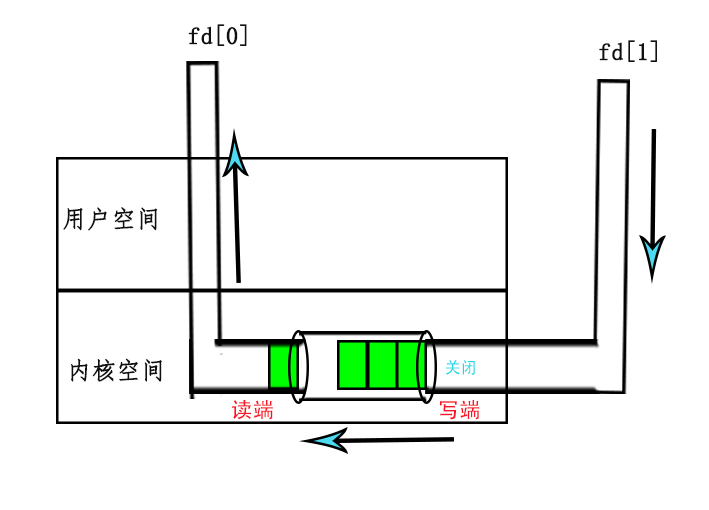
<style>
.page{position:relative;width:709px;height:510px;background:#ffffff}
.page>*{position:absolute;margin:0}
.t1{font:24.1px "FangSong";color:#111010;font-weight:bold}
.t2{font:16px "AdobeHeitiStd-Regular";color:#1dd8e4}
.t3{font:21.5px "AdobeHeitiStd-Regular";color:#f81525}
</style>
<div class="page">
<p class="t1" style="left:188px;top:24px;width:59px;height:22px">fd[0]</p>
<p class="t1" style="left:599px;top:40px;width:58px;height:22px">fd[1]</p>
<p class="t1" style="left:63px;top:207px;width:95px;height:24px">用户空间</p>
<p class="t1" style="left:71px;top:358px;width:91px;height:24px">内核空间</p>
<p class="t2" style="left:445px;top:360px;width:30px;height:15px">关闭</p>
<p class="t3" style="left:231px;top:400px;width:42px;height:20px">读端</p>
<p class="t3" style="left:440px;top:400px;width:40px;height:20px">写端</p>
</div>
